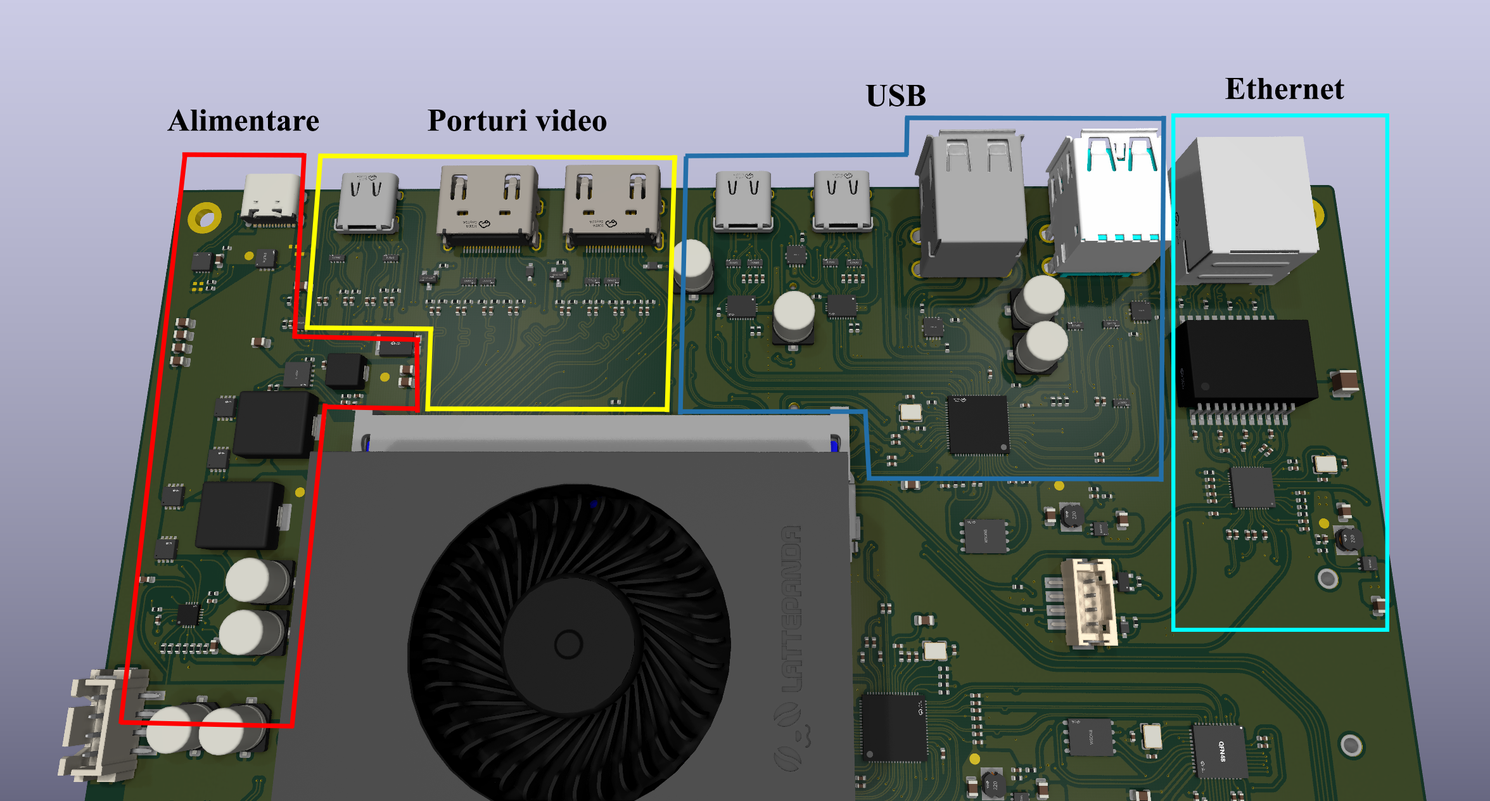
<style>
.page{position:relative;width:1490px;height:801px}
.page>*{position:absolute;margin:0}
.t1{font:31.7px "TimesNewRomanPS-BoldMT";color:#000000}
</style>
<div class="page">
<p class="t1" style="left:1225px;top:78px;width:119px;height:21px">Ethernet</p>
<p class="t1" style="left:865px;top:84px;width:60px;height:22px">USB</p>
<p class="t1" style="left:167px;top:109px;width:152px;height:22px">Alimentare</p>
<p class="t1" style="left:427px;top:109px;width:180px;height:22px">Porturi video</p>
</div>
